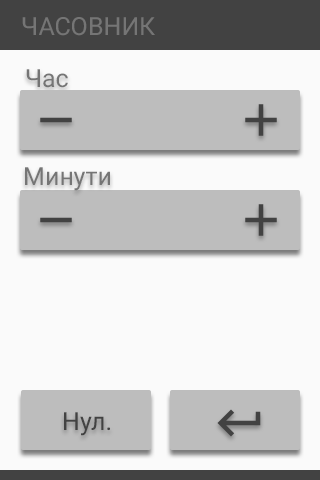
<style>
.page{position:relative;width:320px;height:480px;background:#fafafa}
.page>*{position:absolute;margin:0}
.t1{font:25px "Roboto-Regular";color:#757575}
.t2{font:25px "Roboto-Regular";color:#424242}
</style>
<div class="page">
<p class="t1" style="left:22px;top:17px;width:133px;height:19px">ЧАСОВНИК</p>
<p class="t1" style="left:26px;top:69px;width:42px;height:19px">Час</p>
<p class="t1" style="left:25px;top:167px;width:85px;height:24px">Минути</p>
<p class="t2" style="left:64px;top:412px;width:46px;height:24px">Нул.</p>
</div>
